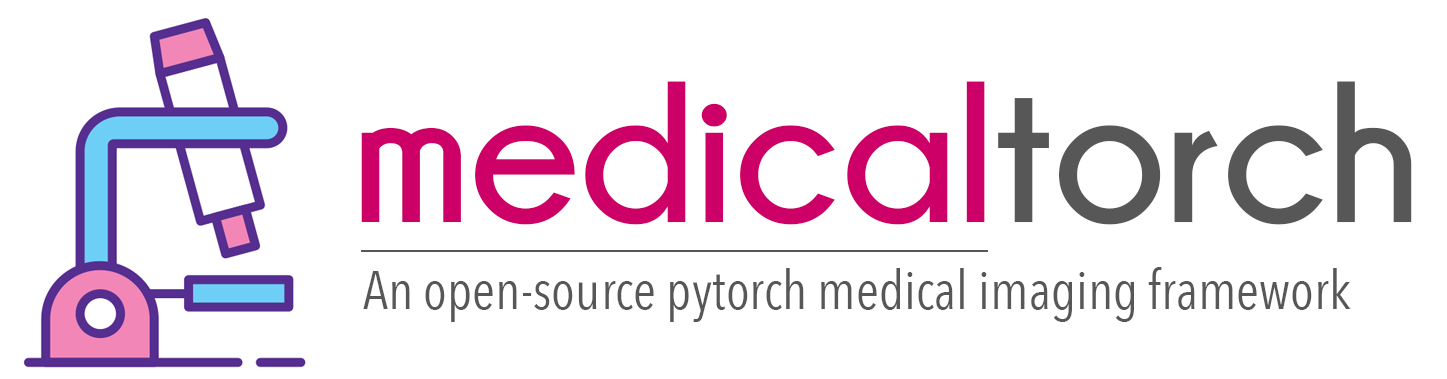
<style>
.page{position:relative;width:1447px;height:379px;background:#ffffff}
.page>*{position:absolute;margin:0}
.t1{font:200px "Champagne&Limousines-Bold";color:#cc0066}
.t2{font:200px "Champagne&Limousines-Bold";color:#575757}
.t3{font:54.2px "AvenirNextCondensed-Regular";color:#575757}
</style>
<div class="page">
<p class="t1" style="left:361px;top:81px;width:1051px;height:144px">medical<span class="t2">torch</span></p>
<p class="t3" style="left:363px;top:267px;width:988px;height:55px">An open-source pytorch medical imaging framework</p>
</div>
